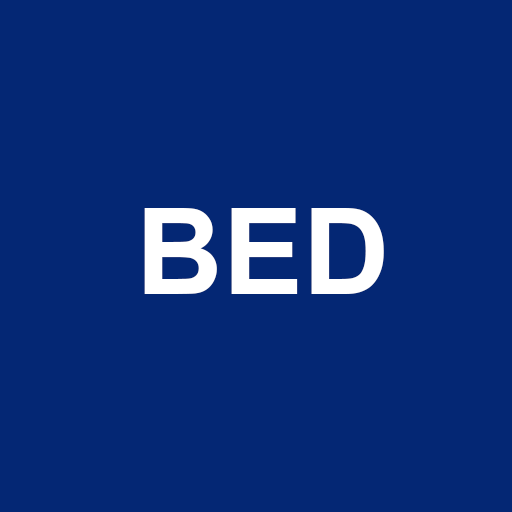
<style>
.page{position:relative;width:512px;height:512px;background:#042774}
.page>*{position:absolute;margin:0}
.t1{font:120px "Arial-BoldMT";color:#ffffff}
</style>
<div class="page">
<p class="t1" style="left:144px;top:208px;width:240px;height:86px">BED</p>
</div>
